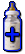
<style>
.page{position:relative;width:25px;height:54px;background:#ffffff}
.page>*{position:absolute;margin:0}
.t1{font:21px "KozGoPro-Medium";color:#0018ff;font-weight:bold}
</style>
<div class="page">
<p class="t1" style="left:5px;top:27px;width:14px;height:14px">+</p>
</div>
